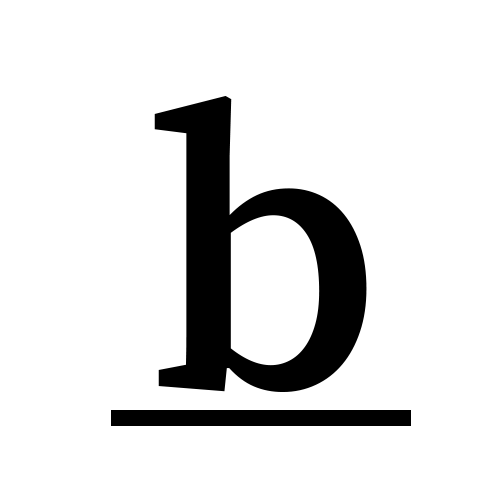
<style>
.page{position:relative;width:500px;height:500px;background:#ffffff}
.page>*{position:absolute;margin:0}
.t1{font:400px "SourceSerifPro-Semibold";color:#000000}
</style>
<div class="page">
<p class="t1" style="left:154px;top:96px;width:213px;height:296px">b</p>
</div>
